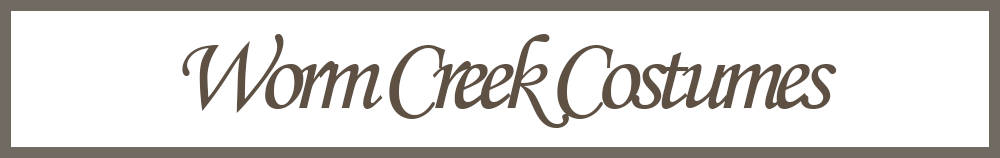
<style>
.page{position:relative;width:1000px;height:158px;background:#ffffff}
.page>*{position:absolute;margin:0}
.t1{font:108px "MonotypeCorsiva";letter-spacing:-0.1em;color:#5e5043}
</style>
<div class="page">
<p class="t1" style="left:182px;top:34px;width:655px;height:94px">Worm Creek Costumes</p>
</div>
